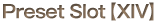
<style>
.page{position:relative;width:159px;height:23px;background:#ffffff}
.page>*{position:absolute;margin:0}
.t1{font:18px "GothicMB101Pro-DeBold";letter-spacing:-0.04em}
.t2{font:18px "GothicMB101Pro-DeBold";letter-spacing:-0.04em;color:#8b6e51}
</style>
<div class="page">
<p class="t1" style="left:3px;top:2px;width:151px;height:19px">Preset Slot【      】</p>
<p class="t2" style="left:116px;top:4px;width:33px;height:15px;opacity:0.9">XIV</p>
</div>
